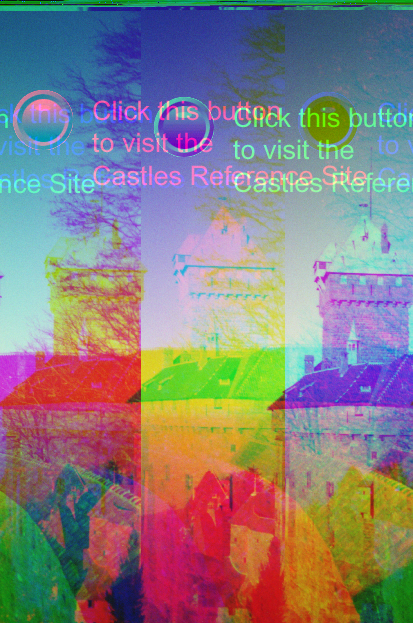
<style>
.page{position:relative;width:413px;height:623px}
.page>*{position:absolute;margin:0}
.t1{font:27px "ArialMT"}
</style>
<div class="page">
<p class="t1" style="left:92px;top:97px;width:275px;height:86px">Click this button <br>to visit the<br>Castles Reference Site</p>
</div>
